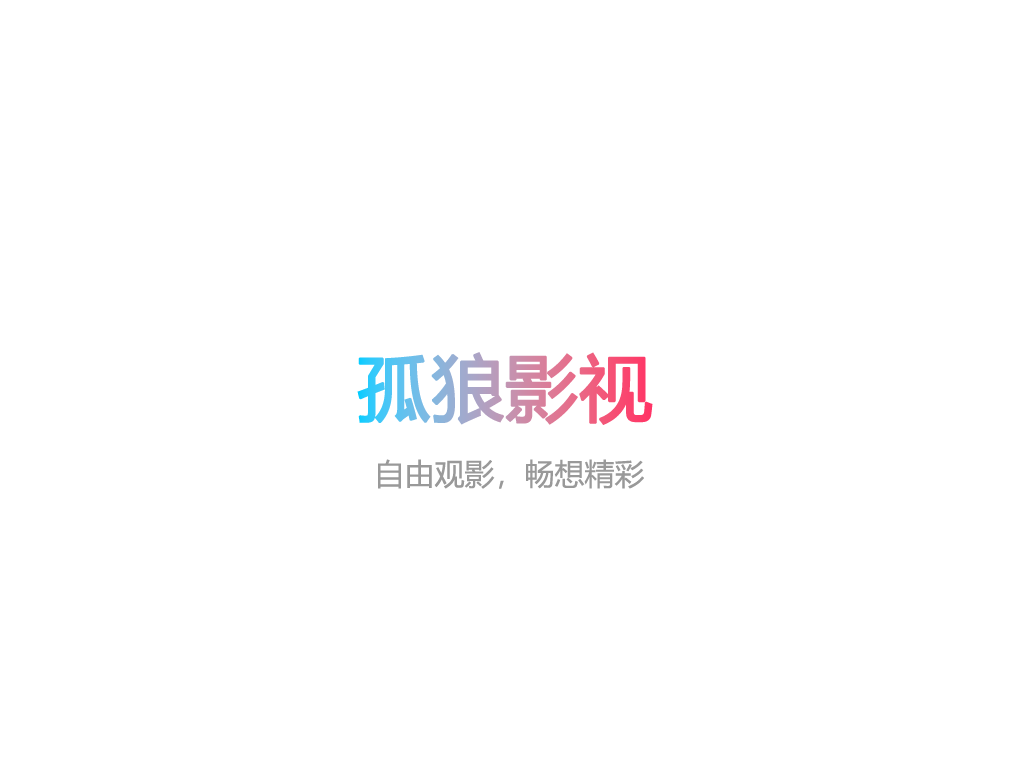
<style>
.page{position:relative;width:1024px;height:768px;background:#ffffff}
.page>*{position:absolute;margin:0}
.t1{font:72px "MicrosoftYaHei";font-weight:bold}
.t2{font:30px "MicrosoftYaHei";color:#999999}
</style>
<div class="page">
<p class="t1" style="left:357px;top:352px;width:296px;height:73px">孤狼影视</p>
<p class="t2" style="left:378px;top:459px;width:266px;height:30px">自由观影，畅想精彩</p>
</div>
